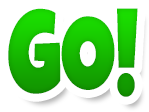
<style>
.page{position:relative;width:149px;height:112px;background:#ffffff}
.page>*{position:absolute;margin:0}
.t1{font:115px "LuckiestGuy-Regular";text-transform:uppercase;scale:0.74 1}
</style>
<div class="page">
<p class="t1" style="left:8px;top:8px;width:130px;height:89px">go!</p>
</div>
